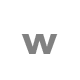
<style>
.page{position:relative;width:80px;height:80px;background:#ffffff}
.page>*{position:absolute;margin:0}
.t1{font:42px "Avenir-Black";color:#818181}
</style>
<div class="page">
<p class="t1" style="left:21px;top:34px;width:37px;height:20px">w</p>
</div>
